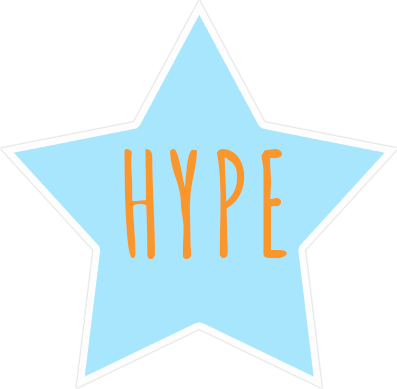
<style>
.page{position:relative;width:397px;height:389px;background:#ffffff}
.page>*{position:absolute;margin:0}
.t1{font:140px "AmaticSC-Bold";letter-spacing:0.05em;color:#f9972d}
</style>
<div class="page">
<p class="t1" style="left:124px;top:149px;width:163px;height:110px">HYPE</p>
</div>
